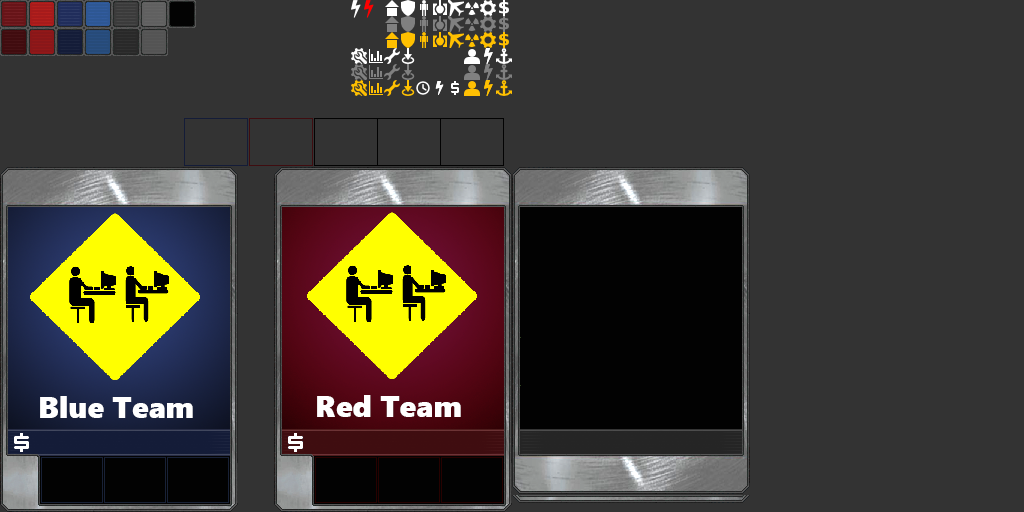
<style>
.page{position:relative;width:1024px;height:512px;background:#333333}
.page>*{position:absolute;margin:0}
.t1{font:30.2px "SegoeUIBlack";color:#ffffff}
</style>
<div class="page">
<p class="t1" style="left:40px;top:396px;width:153px;height:22px">Blue Team</p>
<p class="t1" style="left:317px;top:395px;width:144px;height:22px">Red Team</p>
</div>
